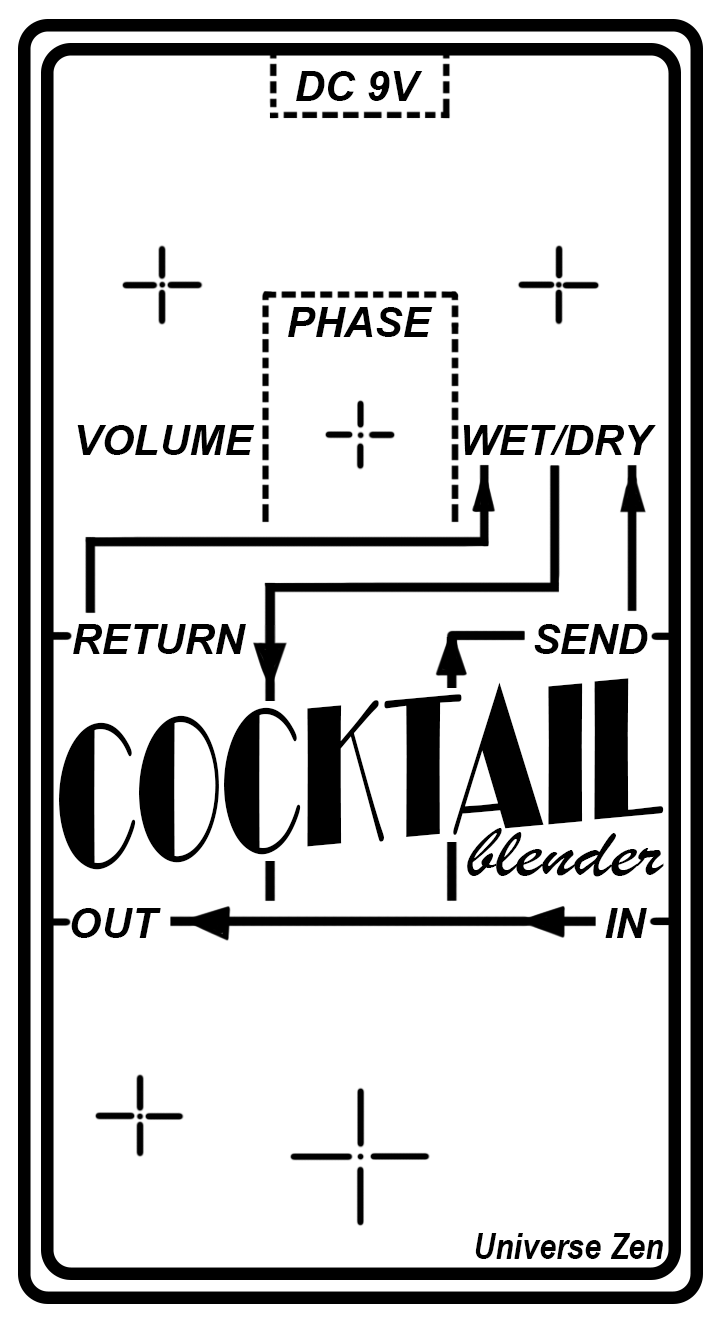
<style>
.page{position:relative;width:720px;height:1323px;background:#ffffff}
.page>*{position:absolute;margin:0}
.t1{font:41.7px "Arial-BoldItalicMT";color:#000000}
.t2{font:206.9px "Broadway";color:#000000;scale:0.55 1}
.t3{font:72.6px "BrushScriptMT";color:#000000;scale:1.22 1}
.t4{font:37px "ArialNarrow-BoldItalic";color:#000000}
</style>
<div class="page">
<p class="t1" style="left:296px;top:71px;width:127px;height:30px">DC 9V</p>
<p class="t1" style="left:288px;top:307px;width:145px;height:30px">PHASE</p>
<p class="t1" style="left:77px;top:425px;width:178px;height:30px">VOLUME</p>
<p class="t1" style="left:463px;top:425px;width:193px;height:30px">WET/DRY</p>
<p class="t1" style="left:73px;top:624px;width:173px;height:30px">RETURN</p>
<p class="t1" style="left:534px;top:624px;width:114px;height:30px">SEND</p>
<p class="t2" style="left:59px;top:678px;width:605px;height:192px;rotate:-5deg">COCKTAIL</p>
<p class="t3" style="left:467px;top:828px;width:197px;height:49px">blender</p>
<p class="t1" style="left:71px;top:908px;width:90px;height:30px">OUT</p>
<p class="t1" style="left:605px;top:908px;width:42px;height:30px">IN</p>
<p class="t4" style="left:475px;top:1233px;width:188px;height:26px">Universe Zen</p>
</div>
